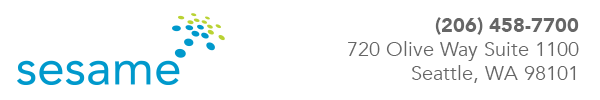
<style>
.page{position:relative;width:600px;height:100px;background:#ffffff}
.page>*{position:absolute;margin:0}
.t1{font:20px "Avenir-Book";color:#666666}
.t2{font:20px "Avenir-Black";color:#666666}
</style>
<div class="page">
<p class="t1" style="left:348px;top:17px;width:231px;height:66px;text-align:right"><span class="t2">(206) 458-7700<br></span>720 Olive Way Suite 1100<br>Seattle, WA 98101</p>
</div>
